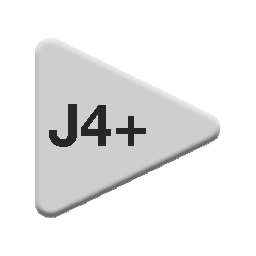
<style>
.page{position:relative;width:256px;height:256px;background:#ffffff}
.page>*{position:absolute;margin:0}
.t1{font:58.6px "HelveticaNeue-Bold";color:#282728}
</style>
<div class="page">
<p class="t1" style="left:49px;top:104px;width:97px;height:43px">J4+</p>
</div>
